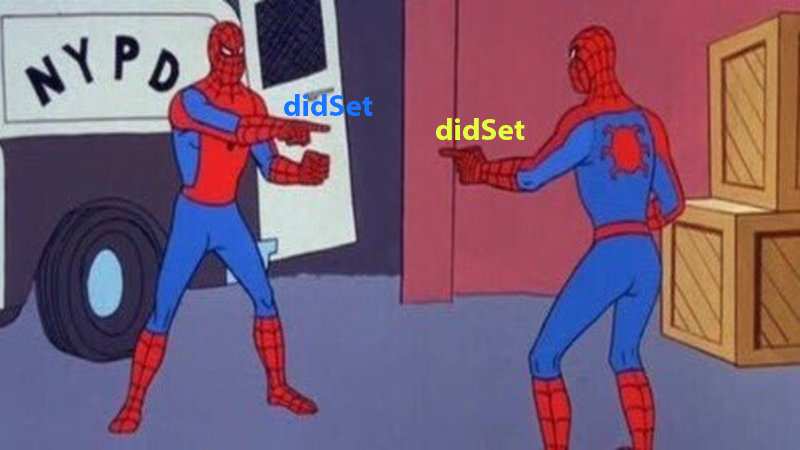
<style>
.page{position:relative;width:800px;height:450px}
.page>*{position:absolute;margin:0}
.t1{font:31px "MyriadPro-Bold";color:#1774ff}
.t2{font:31px "MyriadPro-Bold";color:#e4fc40}
</style>
<div class="page">
<p class="t1" style="left:284px;top:94px;width:89px;height:22px">didSet</p>
<p class="t2" style="left:436px;top:118px;width:89px;height:22px">didSet</p>
</div>
